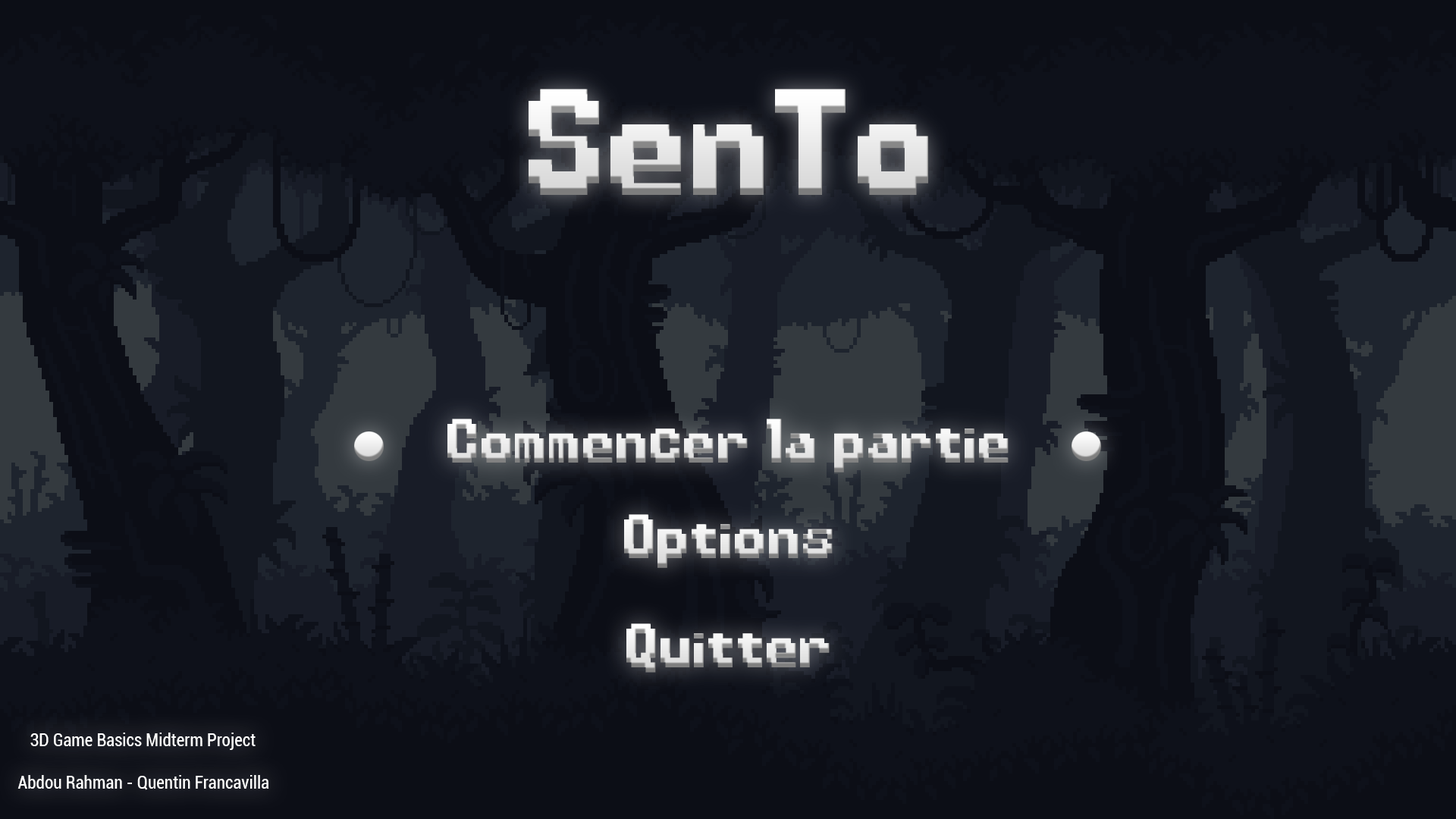
<style>
.page{position:relative;width:1456px;height:819px;background:#0c0e16}
.page>*{position:absolute;margin:0}
.t1{font:153.2px "Power-Clear-Bold"}
.t2{font:63.1px "Power-Clear-Bold"}
.t3{font:17.5px "Roboto-Condensed";color:#ffffff}
</style>
<div class="page">
<p class="t1" style="left:529px;top:89px;width:399px;height:106px">SenTo</p>
<p class="t2" style="left:447px;top:419px;width:562px;height:53px">Commencer la partie</p>
<p class="t2" style="left:624px;top:514px;width:209px;height:54px">Options</p>
<p class="t2" style="left:626px;top:623px;width:204px;height:50px">Quitter</p>
<p class="t3" style="left:30px;top:733px;width:226px;height:17px">3D Game Basics Midterm Project</p>
<p class="t3" style="left:17px;top:775px;width:252px;height:15px">Abdou Rahman - Quentin Francavilla</p>
</div>
